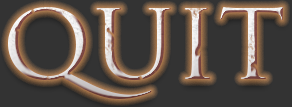
<style>
.page{position:relative;width:292px;height:107px;background:#333333}
.page>*{position:absolute;margin:0}
.t1{font:112px "TrajanPro-Regular"}
</style>
<div class="page">
<p class="t1" style="left:8px;top:7px;width:275px;height:92px">quit</p>
</div>
